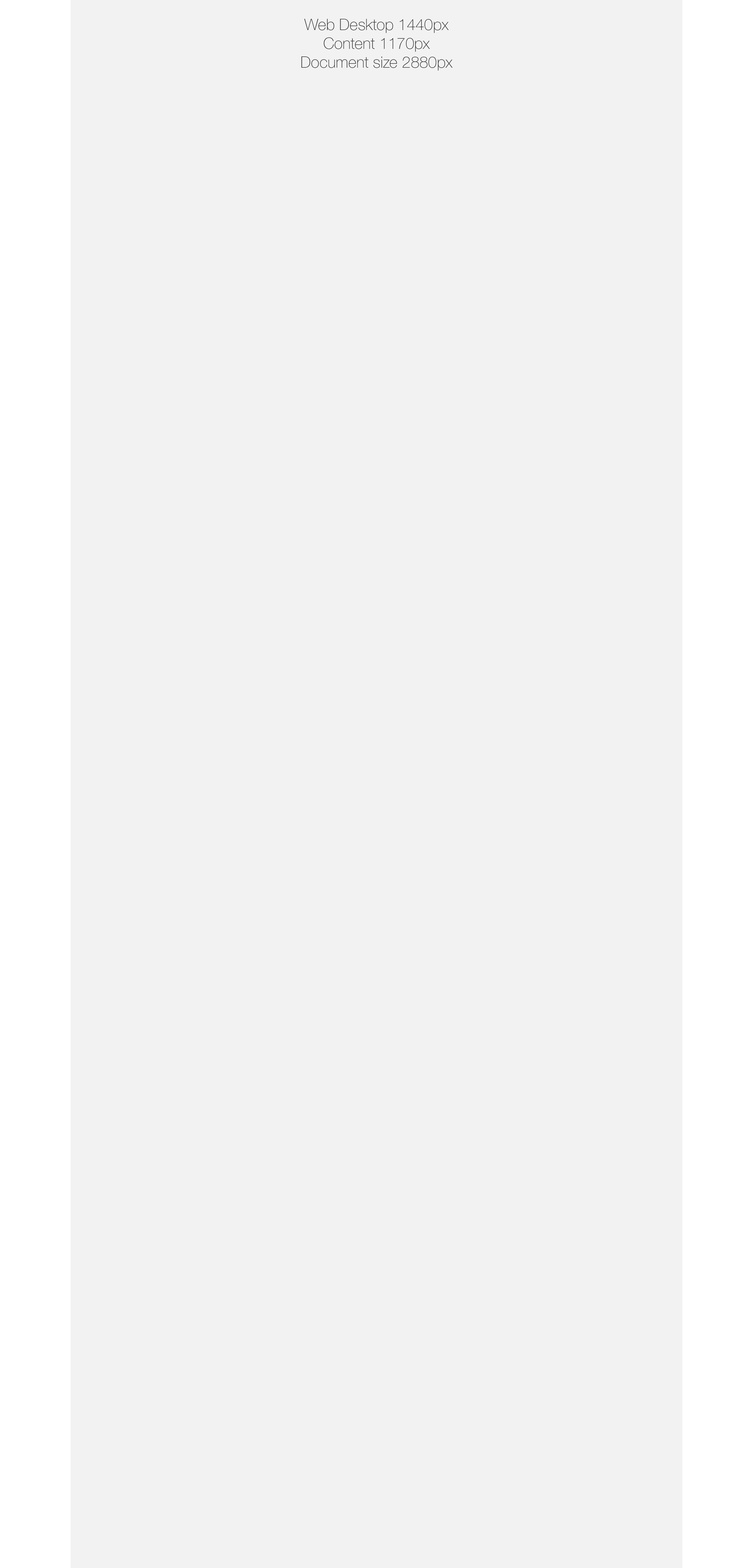
<style>
.page{position:relative;width:753px;height:1568px;background:#f2f2f2}
.page>*{position:absolute;margin:0}
.t1{font:15.7px "HelveticaNeue-Thin";color:#373737}
</style>
<div class="page">
<p class="t1" style="left:301px;top:19px;width:151px;height:52px;text-align:center">Web Desktop 1440px<br>Content 1170px<br>Document size 2880px</p>
</div>
